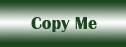
<style>
.page{position:relative;width:126px;height:47px}
.page>*{position:absolute;margin:0}
.t1{font:18px "BritannicBold";color:#1e4621}
</style>
<div class="page">
<p class="t1" style="left:31px;top:17px;width:66px;height:15px">Copy Me</p>
</div>
